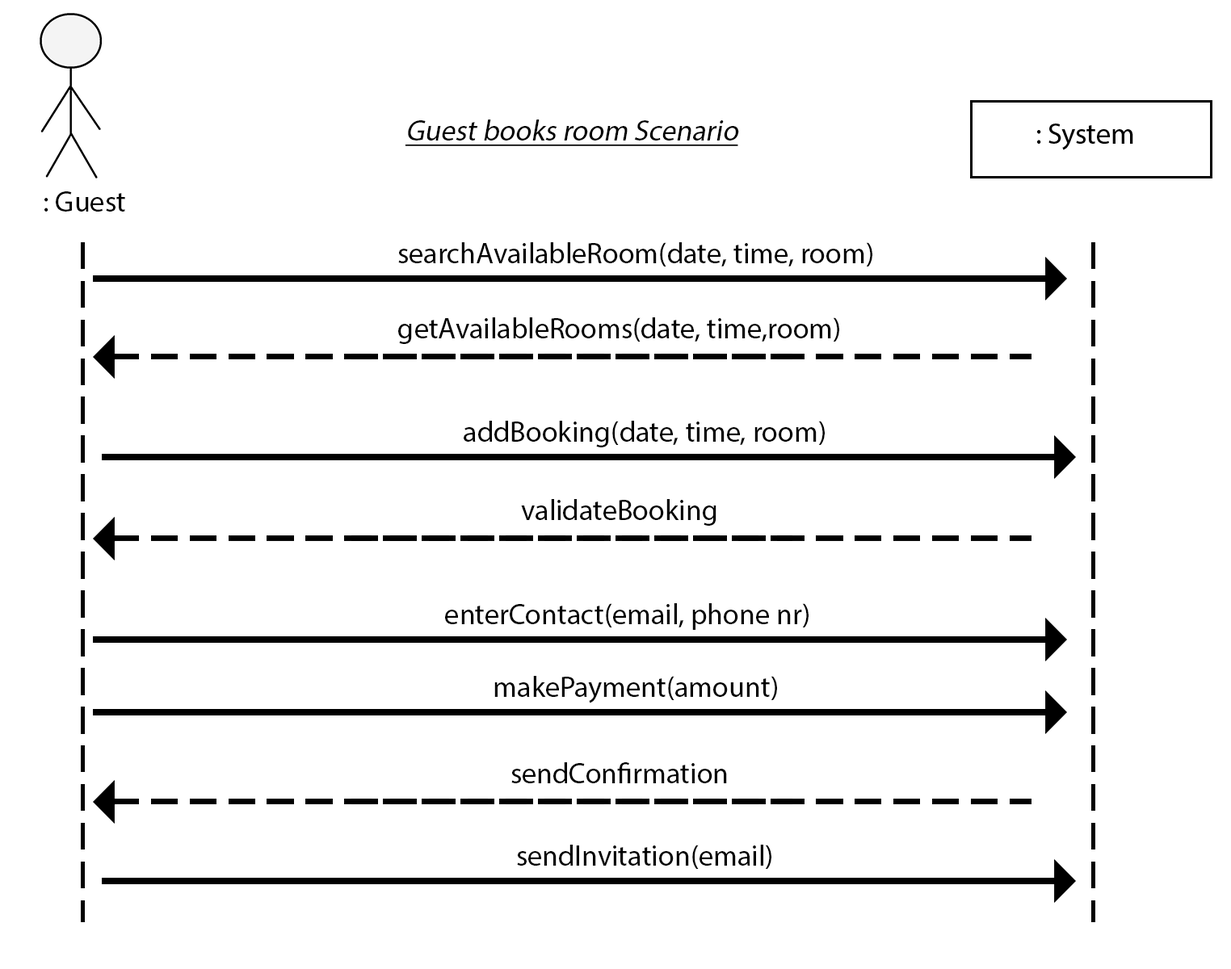
<style>
.page{position:relative;width:1231px;height:969px;background:#ffffff}
.page>*{position:absolute;margin:0}
.t1{font:29.1px "MyriadPro-Regular";color:#000000;font-style:italic;text-decoration:underline}
.t2{font:29.1px "MyriadPro-Regular";color:#000000}
</style>
<div class="page">
<p class="t1" style="left:405px;top:120px;width:334px;height:26px">Guest books room Scenario</p>
<p class="t2" style="left:44px;top:191px;width:81px;height:21px">: Guest</p>
<p class="t2" style="left:398px;top:242px;width:474px;height:24px">searchAvailableRoom(date, time, room)</p>
<p class="t2" style="left:398px;top:317px;width:441px;height:27px">getAvailableRooms(date, time,room)</p>
<p class="t2" style="left:463px;top:421px;width:361px;height:26px">addBooking(date, time, room)</p>
<p class="t2" style="left:521px;top:499px;width:195px;height:27px">validateBooking</p>
<p class="t2" style="left:445px;top:603px;width:363px;height:27px">enterContact(email, phone nr)</p>
<p class="t2" style="left:494px;top:676px;width:283px;height:27px">makePayment(amount)</p>
<p class="t2" style="left:511px;top:762px;width:216px;height:21px">sendConfirmation</p>
<p class="t2" style="left:517px;top:845px;width:254px;height:24px">sendInvitation(email)</p>
</div>
